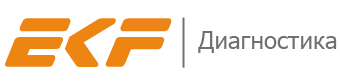
<style>
.page{position:relative;width:340px;height:83px;background:#ffffff}
.page>*{position:absolute;margin:0}
.t1{font:24px "Tahoma";color:#707070}
</style>
<div class="page">
<p class="t1" style="left:198px;top:31px;width:139px;height:22px">Диагностика</p>
</div>
